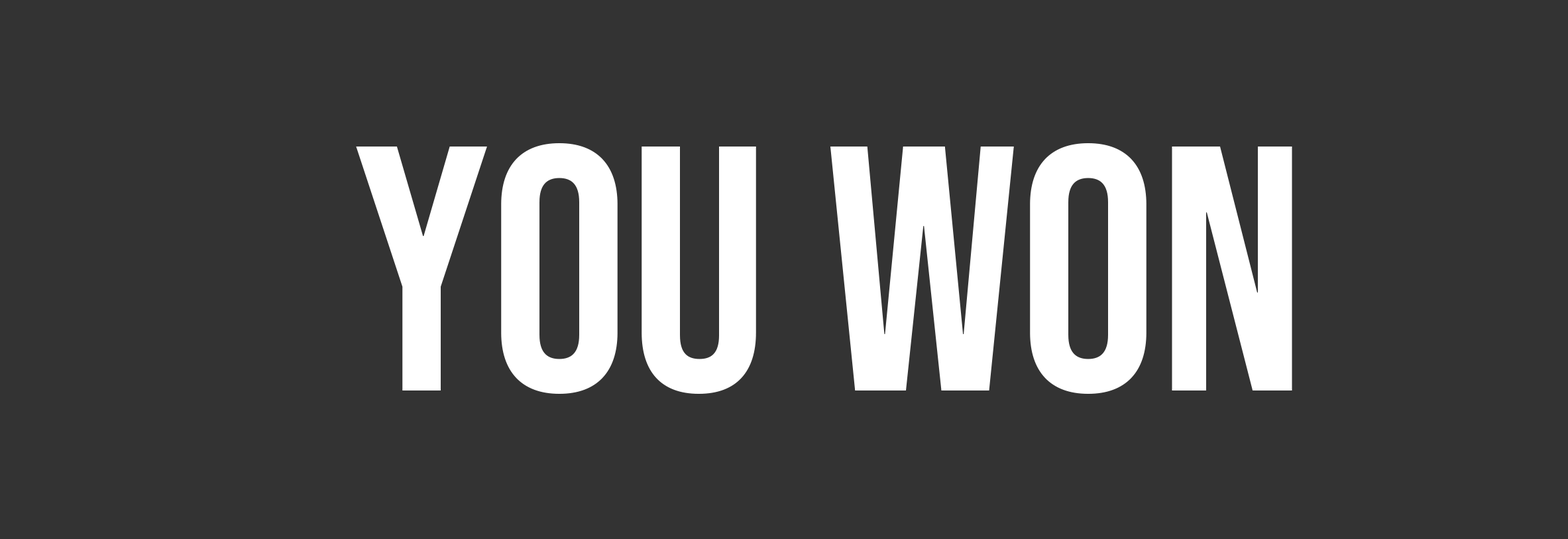
<style>
.page{position:relative;width:1568px;height:539px;background:#333333}
.page>*{position:absolute;margin:0}
.t1{font:348px "BebasNeue-Regular";color:#ffffff}
</style>
<div class="page">
<p class="t1" style="left:356px;top:143px;width:936px;height:251px">you won</p>
</div>
